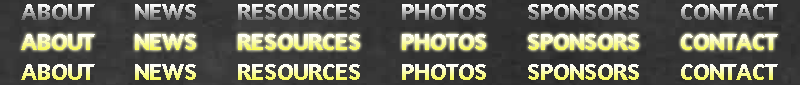
<style>
.page{position:relative;width:800px;height:85px}
.page>*{position:absolute;margin:0}
.t1{font:24px "Amaranth-Bold"}
</style>
<div class="page">
<p class="t1" style="left:21px;top:4px;width:74px;height:16px">ABOUT</p>
<p class="t1" style="left:135px;top:4px;width:61px;height:16px">NEWS</p>
<p class="t1" style="left:238px;top:4px;width:122px;height:16px">RESOURCES</p>
<p class="t1" style="left:402px;top:4px;width:84px;height:16px">PHOTOS</p>
<p class="t1" style="left:528px;top:4px;width:111px;height:16px">SPONSORS</p>
<p class="t1" style="left:681px;top:4px;width:97px;height:16px">CONTACT</p>
<p class="t1" style="left:21px;top:34px;width:74px;height:16px">ABOUT</p>
<p class="t1" style="left:135px;top:34px;width:61px;height:16px">NEWS</p>
<p class="t1" style="left:238px;top:34px;width:122px;height:16px">RESOURCES</p>
<p class="t1" style="left:402px;top:34px;width:84px;height:16px">PHOTOS</p>
<p class="t1" style="left:528px;top:34px;width:111px;height:16px">SPONSORS</p>
<p class="t1" style="left:681px;top:34px;width:97px;height:16px">CONTACT</p>
<p class="t1" style="left:21px;top:64px;width:74px;height:16px">ABOUT</p>
<p class="t1" style="left:135px;top:64px;width:61px;height:16px">NEWS</p>
<p class="t1" style="left:238px;top:64px;width:122px;height:16px">RESOURCES</p>
<p class="t1" style="left:402px;top:64px;width:84px;height:16px">PHOTOS</p>
<p class="t1" style="left:528px;top:64px;width:111px;height:16px">SPONSORS</p>
<p class="t1" style="left:681px;top:64px;width:97px;height:16px">CONTACT</p>
</div>
